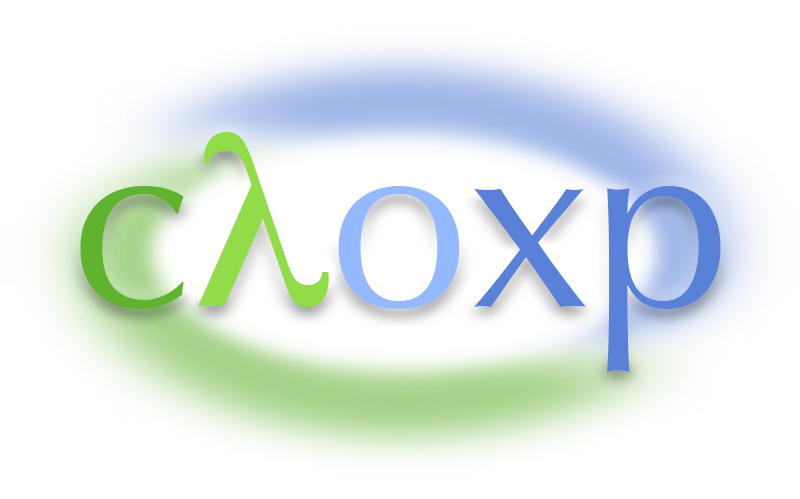
<style>
.page{position:relative;width:800px;height:499px;background:#ffffff}
.page>*{position:absolute;margin:0}
.t1{font:248.1px "Optima-Regular";color:#5981d8}
.t2{font:248.1px "Optima-Regular";color:#5fb32e}
.t3{font:248.1px "Symbol";color:#92dc49}
.t4{font:248.1px "Optima-Regular";color:#95b9ff}
</style>
<div class="page">
<p class="t1" style="left:80px;top:132px;width:641px;height:240px"><span class="t2">c</span><span class="t3">l</span><span class="t4">o</span>xp</p>
</div>
